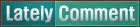
<style>
.page{position:relative;width:140px;height:27px}
.page>*{position:absolute;margin:0}
.t1{font:17px "H2hdrM"}
</style>
<div class="page">
<p class="t1" style="left:6px;top:5px;width:129px;height:18px">Lately Comment</p>
</div>
